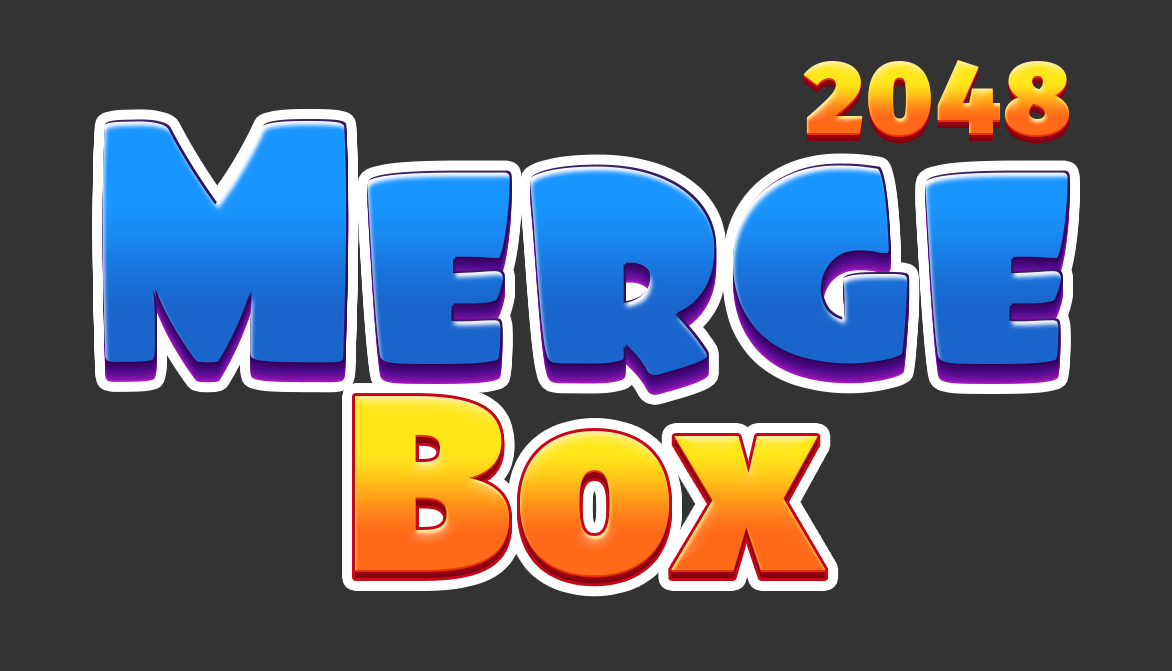
<style>
.page{position:relative;width:1172px;height:671px;background:#333333}
.page>*{position:absolute;margin:0}
.t1{font:103.8px "FiraSans-Ultra";letter-spacing:0.025em;scale:1.05 1}
.t2{font:351px "Foo-Regular";letter-spacing:-0.02em;scale:1.05 1}
.t3{font:249.1px "FiraSans-Ultra";letter-spacing:0.025em;scale:1.05 1}
</style>
<div class="page">
<p class="t1" style="left:803px;top:60px;width:266px;height:75px">2048</p>
<p class="t2" style="left:102px;top:118px;width:968px;height:257px">Merge</p>
<p class="t3" style="left:355px;top:396px;width:471px;height:180px">Box</p>
</div>
